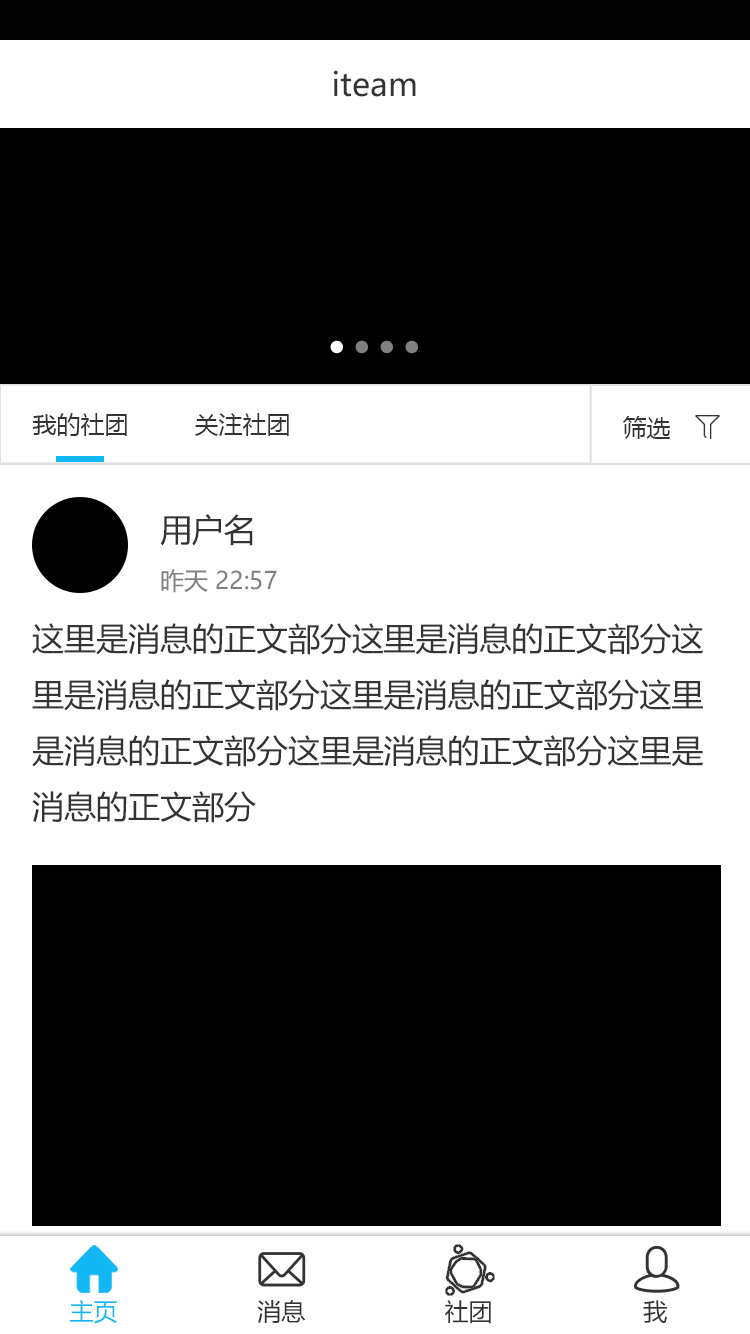
<style>
.page{position:relative;width:750px;height:1334px;background:#ffffff}
.page>*{position:absolute;margin:0}
.t1{font:32px "MicrosoftYaHei";color:#333333}
.t2{font:24px "MicrosoftYaHei";color:#333333}
.t3{font:24px "MicrosoftYaHei";color:#808080}
.t4{font:24px "MicrosoftYaHei";color:#12b7f5}
</style>
<div class="page">
<p class="t1" style="left:333px;top:70px;width:83px;height:27px">iteam</p>
<p class="t2" style="left:32px;top:413px;width:95px;height:23px">我的社团</p>
<p class="t2" style="left:195px;top:413px;width:94px;height:23px">关注社团</p>
<p class="t2" style="left:622px;top:416px;width:48px;height:23px">筛选</p>
<p class="t1" style="left:160px;top:514px;width:93px;height:32px">用户名</p>
<p class="t3" style="left:161px;top:569px;width:116px;height:24px">昨天 22:57</p>
<p class="t1" style="left:32px;top:623px;width:672px;height:200px">这里是消息的正文部分这里是消息的正文部分这里是消息的正文部分这里是消息的正文部分这里是消息的正文部分这里是消息的正文部分这里是消息的正文部分</p>
<p class="t4" style="left:70px;top:1300px;width:47px;height:24px">主页</p>
<p class="t2" style="left:257px;top:1300px;width:49px;height:23px">消息</p>
<p class="t2" style="left:444px;top:1300px;width:47px;height:24px">社团</p>
<p class="t2" style="left:643px;top:1300px;width:24px;height:23px">我</p>
</div>
